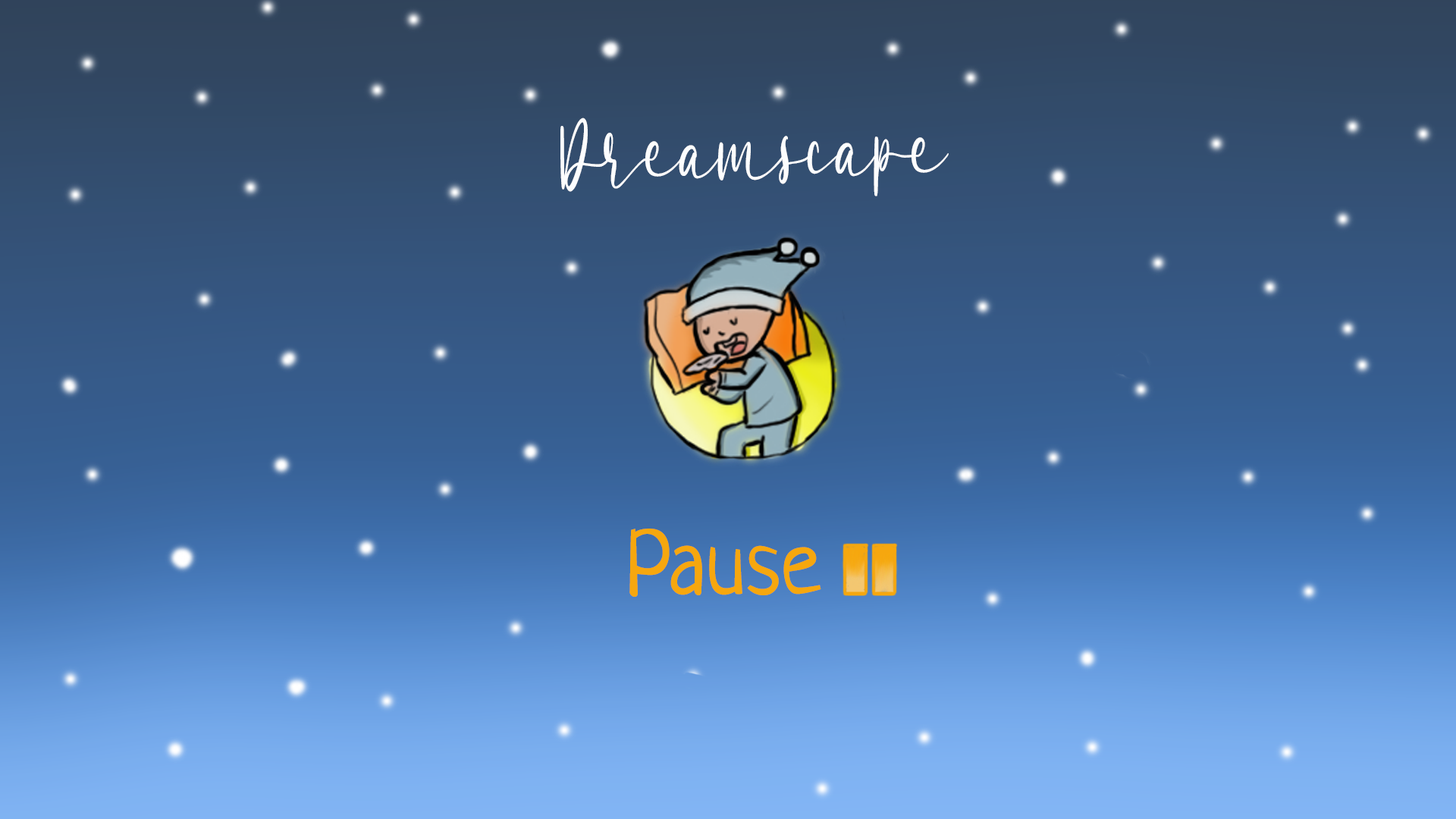
<style>
.page{position:relative;width:1456px;height:819px}
.page>*{position:absolute;margin:0}
.t1{font:133px "SoulwavePersonalUse";color:#fcfdfe;scale:0.47 1}
.t2{font:91px "Neucha";color:#f6a70e}
</style>
<div class="page">
<p class="t1" style="left:560px;top:118px;width:389px;height:78px;rotate:-1deg">Dreamscape</p>
<p class="t2" style="left:629px;top:529px;width:192px;height:68px">Pause</p>
</div>
